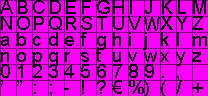
<style>
.page{position:relative;width:208px;height:96px;background:#ff00ff}
.page>*{position:absolute;margin:0}
.t1{font:18.7px "ArialMT";color:#000000}
</style>
<div class="page">
<p class="t1" style="left:0px;top:0px;width:13px;height:14px">A</p>
<p class="t1" style="left:18px;top:0px;width:10px;height:14px">B</p>
<p class="t1" style="left:33px;top:0px;width:12px;height:14px">C</p>
<p class="t1" style="left:50px;top:0px;width:11px;height:14px">D</p>
<p class="t1" style="left:66px;top:0px;width:10px;height:14px">E</p>
<p class="t1" style="left:82px;top:0px;width:9px;height:14px">F</p>
<p class="t1" style="left:97px;top:0px;width:13px;height:14px">G</p>
<p class="t1" style="left:113px;top:0px;width:11px;height:14px">H</p>
<p class="t1" style="left:145px;top:0px;width:7px;height:14px">J</p>
<p class="t1" style="left:162px;top:0px;width:11px;height:14px">K</p>
<p class="t1" style="left:178px;top:0px;width:8px;height:14px">L</p>
<p class="t1" style="left:193px;top:0px;width:13px;height:14px">M</p>
<p class="t1" style="left:1px;top:16px;width:11px;height:14px">N</p>
<p class="t1" style="left:17px;top:16px;width:13px;height:14px">O</p>
<p class="t1" style="left:34px;top:16px;width:10px;height:14px">P</p>
<p class="t1" style="left:49px;top:16px;width:13px;height:14px">Q</p>
<p class="t1" style="left:66px;top:16px;width:11px;height:14px">R</p>
<p class="t1" style="left:81px;top:16px;width:11px;height:14px">S</p>
<p class="t1" style="left:97px;top:16px;width:10px;height:14px">T</p>
<p class="t1" style="left:113px;top:16px;width:11px;height:14px">U</p>
<p class="t1" style="left:128px;top:16px;width:13px;height:14px">V</p>
<p class="t1" style="left:160px;top:16px;width:13px;height:14px">X</p>
<p class="t1" style="left:176px;top:16px;width:12px;height:14px">Y</p>
<p class="t1" style="left:192px;top:16px;width:11px;height:14px">Z</p>
<p class="t1" style="left:1px;top:36px;width:9px;height:10px">a</p>
<p class="t1" style="left:17px;top:32px;width:9px;height:14px">b</p>
<p class="t1" style="left:33px;top:36px;width:8px;height:10px">c</p>
<p class="t1" style="left:49px;top:32px;width:9px;height:14px">d</p>
<p class="t1" style="left:65px;top:36px;width:9px;height:10px">e</p>
<p class="t1" style="left:81px;top:32px;width:6px;height:14px">f</p>
<p class="t1" style="left:97px;top:36px;width:9px;height:14px">g</p>
<p class="t1" style="left:113px;top:32px;width:8px;height:14px">h</p>
<p class="t1" style="left:129px;top:32px;width:2px;height:14px">i</p>
<p class="t1" style="left:143px;top:32px;width:4px;height:18px">j</p>
<p class="t1" style="left:161px;top:32px;width:8px;height:14px">k</p>
<p class="t1" style="left:193px;top:36px;width:14px;height:10px">m</p>
<p class="t1" style="left:1px;top:52px;width:8px;height:10px">n</p>
<p class="t1" style="left:17px;top:52px;width:9px;height:10px">o</p>
<p class="t1" style="left:33px;top:52px;width:9px;height:14px">p</p>
<p class="t1" style="left:49px;top:52px;width:9px;height:14px">q</p>
<p class="t1" style="left:65px;top:52px;width:5px;height:10px">r</p>
<p class="t1" style="left:81px;top:52px;width:8px;height:10px">s</p>
<p class="t1" style="left:96px;top:49px;width:5px;height:13px">t</p>
<p class="t1" style="left:113px;top:52px;width:8px;height:10px">u</p>
<p class="t1" style="left:128px;top:52px;width:9px;height:10px">v</p>
<p class="t1" style="left:144px;top:52px;width:13px;height:10px">w</p>
<p class="t1" style="left:160px;top:52px;width:9px;height:10px">x</p>
<p class="t1" style="left:176px;top:52px;width:9px;height:14px">y</p>
<p class="t1" style="left:192px;top:52px;width:9px;height:10px">z</p>
<p class="t1" style="left:1px;top:64px;width:9px;height:14px">0</p>
<p class="t1" style="left:18px;top:64px;width:5px;height:14px">1</p>
<p class="t1" style="left:33px;top:64px;width:9px;height:14px">2</p>
<p class="t1" style="left:49px;top:64px;width:9px;height:14px">3</p>
<p class="t1" style="left:64px;top:64px;width:10px;height:14px">4</p>
<p class="t1" style="left:81px;top:64px;width:9px;height:14px">5</p>
<p class="t1" style="left:97px;top:64px;width:9px;height:14px">6</p>
<p class="t1" style="left:113px;top:64px;width:9px;height:14px">7</p>
<p class="t1" style="left:129px;top:64px;width:9px;height:14px">8</p>
<p class="t1" style="left:145px;top:64px;width:9px;height:14px">9</p>
<p class="t1" style="left:177px;top:76px;width:2px;height:5px">,</p>
<p class="t1" style="left:1px;top:80px;width:2px;height:5px">’</p>
<p class="t1" style="left:17px;top:80px;width:5px;height:5px">”</p>
<p class="t1" style="left:34px;top:84px;width:2px;height:10px">:</p>
<p class="t1" style="left:50px;top:84px;width:2px;height:13px">;</p>
<p class="t1" style="left:82px;top:80px;width:2px;height:14px">!</p>
<p class="t1" style="left:97px;top:80px;width:9px;height:14px">?</p>
<p class="t1" style="left:112px;top:80px;width:10px;height:14px">€</p>
<p class="t1" style="left:129px;top:80px;width:15px;height:14px">%</p>
<p class="t1" style="left:144px;top:80px;width:5px;height:18px">)</p>
<p class="t1" style="left:161px;top:80px;width:5px;height:18px">(</p>
<p class="t1" style="left:176px;top:80px;width:6px;height:14px">/</p>
<p class="t1" style="left:193px;top:83px;width:10px;height:10px">+</p>
</div>
